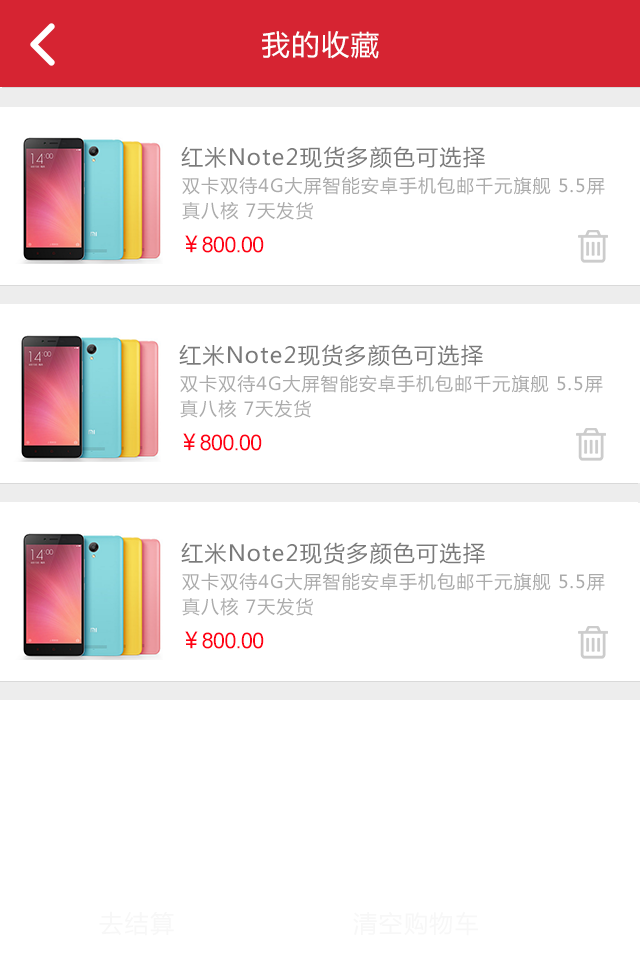
<style>
.page{position:relative;width:640px;height:960px;background:#ffffff}
.page>*{position:absolute;margin:0}
.t1{font:28px "MicrosoftYaHei";letter-spacing:0.06em;color:#ffffff}
.t2{font:22px "MicrosoftYaHei";letter-spacing:0.06em;color:#7a7a7a}
.t3{font:18px/25px "MicrosoftYaHei";letter-spacing:0.06em;color:#ababab}
.t4{font:22px "ArialMT";letter-spacing:-0.04em;color:#ff0014}
.t5{font:22px "MicrosoftYaHei";letter-spacing:-0.04em;color:#ff0014}
.t6{font:24px "MicrosoftYaHei";letter-spacing:0.06em;color:#f7f7f7}
</style>
<div class="page">
<p class="t1" style="left:262px;top:31px;width:117px;height:28px">我的收藏</p>
<p class="t2" style="left:181px;top:146px;width:304px;height:23px">红米Note2现货多颜色可选择</p>
<p class="t3" style="left:182px;top:176px;width:423px;height:44px">双卡双待4G大屏智能安卓手机包邮千元旗舰 5.5屏 <br>真八核 7天发货</p>
<p class="t4" style="left:185px;top:235px;width:79px;height:18px"><span class="t5">￥</span>800.00</p>
<p class="t2" style="left:179px;top:344px;width:304px;height:23px">红米Note2现货多颜色可选择</p>
<p class="t3" style="left:180px;top:374px;width:423px;height:44px">双卡双待4G大屏智能安卓手机包邮千元旗舰 5.5屏 <br>真八核 7天发货</p>
<p class="t4" style="left:183px;top:433px;width:79px;height:18px"><span class="t5">￥</span>800.00</p>
<p class="t2" style="left:181px;top:542px;width:304px;height:23px">红米Note2现货多颜色可选择</p>
<p class="t3" style="left:182px;top:572px;width:423px;height:44px">双卡双待4G大屏智能安卓手机包邮千元旗舰 5.5屏 <br>真八核 7天发货</p>
<p class="t4" style="left:185px;top:631px;width:79px;height:18px"><span class="t5">￥</span>800.00</p>
<p class="t6" style="left:99px;top:911px;width:75px;height:25px">去结算</p>
<p class="t6" style="left:353px;top:911px;width:125px;height:25px">清空购物车</p>
</div>
